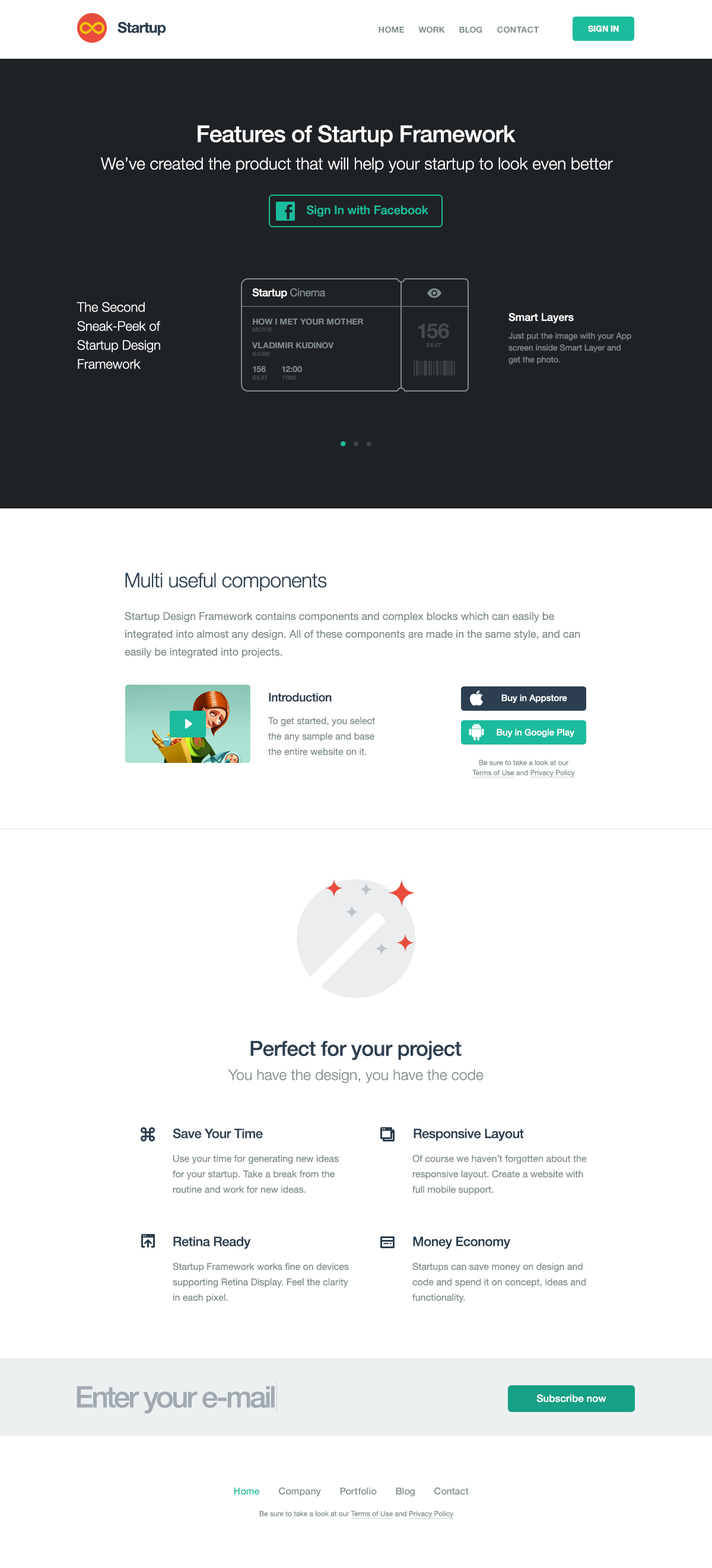
<style>
.page{position:relative;width:712px;height:1568px;background:#ffffff}
.page>*{position:absolute;margin:0}
.t1{font:14.8px "HelveticaNeue-Bold";letter-spacing:-0.04em;color:#2c3e50}
.t2{font:8.3px "HelveticaNeue-Bold";letter-spacing:0.02em;color:#7f8c8d;text-transform:uppercase}
.t3{font:8.3px "HelveticaNeue-Bold";color:#ffffff;text-transform:uppercase}
.t4{font:23.1px "HelveticaNeue-Medium";letter-spacing:-0.02em;color:#ffffff}
.t5{font:16.6px "HelveticaNeue-Light";color:#ffffff}
.t6{font:11.9px "HelveticaNeue-Medium";color:#1abc9c}
.t7{font:10.7px "HelveticaNeue-Medium";letter-spacing:-0.02em;color:#ffffff}
.t8{font:10.7px "HelveticaNeue";letter-spacing:-0.02em;color:#7f8c8d}
.t9{font:13.1px/19px "HelveticaNeue-Light";color:#ffffff}
.t10{font:8.3px "HelveticaNeue-Bold";color:#7f8c8d;text-transform:uppercase}
.t11{font:8.3px/11.9px "HelveticaNeue";color:#7f8c8d}
.t12{font:10.7px/10.7px "HelveticaNeue-Medium";color:#ffffff}
.t13{font:8.3px/10.7px "HelveticaNeue";color:#7f8c8d}
.t14{font:5.9px "HelveticaNeue-Bold";letter-spacing:0.02em;color:#444b4d;text-transform:uppercase}
.t15{font:20.8px "HelveticaNeue-Bold";letter-spacing:-0.02em;color:#444b4d;text-transform:uppercase}
.t16{font:20.2px "HelveticaNeue-Light";letter-spacing:-0.02em;color:#2c3e50}
.t17{font:10.7px/17.8px "HelveticaNeue";color:#7f8c8d}
.t18{font:11.9px "HelveticaNeue-Medium";letter-spacing:-0.02em;color:#2c3e50}
.t19{font:8.9px "HelveticaNeue-Medium";color:#ffffff}
.t20{font:9.5px/15.4px "HelveticaNeue";color:#7f8c8d}
.t21{font:7.1px/10.1px "HelveticaNeue";color:#7f8c8d}
.t22{font:7.1px/10.1px "HelveticaNeue";color:#7f8c8d;text-decoration:underline}
.t23{font:20.8px "HelveticaNeue-Medium";letter-spacing:-0.02em;color:#2c3e50}
.t24{font:14.8px "HelveticaNeue-Light";color:#7f8c8d}
.t25{font:13.1px "HelveticaNeue-Medium";letter-spacing:-0.02em;color:#2c3e50}
.t26{font:29.7px "HelveticaNeue-Medium";letter-spacing:-0.06em;color:#a1a9b1}
.t27{font:10.1px "HelveticaNeue-Medium";color:#ffffff}
.t28{font:9.5px "HelveticaNeue-Medium";color:#7f8c8d}
.t29{font:9.5px "HelveticaNeue-Medium";color:#1abc9c}
.t30{font:7.1px "HelveticaNeue";color:#7f8c8d}
.t31{font:7.1px "HelveticaNeue";color:#7f8c8d;text-decoration:underline}
</style>
<div class="page">
<p class="t1" style="left:117px;top:21px;width:49px;height:15px">Startup</p>
<p class="t2" style="left:379px;top:26px;width:160px;height:7px">home      work      blog      contact</p>
<p class="t3" style="left:588px;top:25px;width:31px;height:7px">sign in</p>
<p class="t4" style="left:198px;top:125px;width:318px;height:22px">Features of Startup Framework</p>
<p class="t5" style="left:101px;top:157px;width:512px;height:16px">We’ve created the product that will help your startup to look even better</p>
<p class="t6" style="left:307px;top:205px;width:121px;height:12px">Sign In with Facebook</p>
<p class="t7" style="left:252px;top:288px;width:74px;height:10px">Startup <span class="t8">Cinema</span></p>
<p class="t9" style="left:77px;top:302px;width:83px;height:67px">The Second Sneak-Peek of Startup Design Framework</p>
<p class="t10" style="left:253px;top:318px;width:110px;height:7px">how i met your mother</p>
<p class="t11" style="left:508px;top:313px;width:123px;height:51px"><span class="t12">Smart Layers<br></span><span class="t13">Just put the image with your </span>App screen inside Smart Layer and get the photo.</p>
<p class="t14" style="left:253px;top:327px;width:19px;height:5px">movie</p>
<p class="t15" style="left:418px;top:323px;width:31px;height:16px">156</p>
<p class="t10" style="left:252px;top:342px;width:82px;height:7px">vladimir kudinov</p>
<p class="t14" style="left:253px;top:351px;width:18px;height:5px">name</p>
<p class="t14" style="left:426px;top:342px;width:16px;height:6px">seat</p>
<p class="t14" style="left:252px;top:375px;width:16px;height:5px">seat</p>
<p class="t10" style="left:253px;top:366px;width:13px;height:7px">156</p>
<p class="t14" style="left:282px;top:375px;width:15px;height:5px">time</p>
<p class="t10" style="left:282px;top:366px;width:20px;height:7px">12:00</p>
<p class="t16" style="left:125px;top:573px;width:202px;height:18px">Multi useful components</p>
<p class="t17" style="left:125px;top:612px;width:455px;height:46px">Startup Design Framework contains components and complex blocks which can easily be integrated into almost any design. All of these components are made in the same style, and can easily be integrated into projects.</p>
<p class="t18" style="left:269px;top:693px;width:63px;height:9px">Introduction</p>
<p class="t19" style="left:501px;top:694px;width:66px;height:9px">Buy in Appstore</p>
<p class="t20" style="left:268px;top:717px;width:107px;height:38px">To get started, you select the any sample and base the entire website on it.</p>
<p class="t19" style="left:497px;top:729px;width:77px;height:8px">Buy in Google Play</p>
<p class="t21" style="left:472px;top:759px;width:103px;height:19px;text-align:center">Be sure to take a look at our <br><span class="t22">Terms of Use </span>and <span class="t22">Privacy Policy</span></p>
<p class="t23" style="left:250px;top:1041px;width:212px;height:19px">Perfect for your project</p>
<p class="t24" style="left:228px;top:1069px;width:256px;height:14px">You have the design, you have the code</p>
<p class="t25" style="left:173px;top:1128px;width:90px;height:10px">Save Your Time</p>
<p class="t25" style="left:414px;top:1128px;width:110px;height:13px">Responsive Layout</p>
<p class="t20" style="left:173px;top:1154px;width:166px;height:39px">Use your time for generating new ideas for your startup. Take a break from the routine and work for new ideas.</p>
<p class="t20" style="left:412px;top:1154px;width:175px;height:41px">Of course we haven’t forgotten about the responsive layout. Create a website with full mobile support.</p>
<p class="t25" style="left:173px;top:1236px;width:78px;height:13px">Retina Ready</p>
<p class="t25" style="left:413px;top:1236px;width:97px;height:13px">Money Economy</p>
<p class="t20" style="left:173px;top:1262px;width:176px;height:41px">Startup Framework works fine on devices supporting Retina Display. Feel the clarity in each pixel.</p>
<p class="t20" style="left:412px;top:1262px;width:174px;height:41px">Startups can save money on design and code and spend it on concept, ideas and functionality.</p>
<p class="t26" style="left:77px;top:1386px;width:198px;height:28px">Enter your e-mail</p>
<p class="t27" style="left:536px;top:1394px;width:70px;height:8px">Subscribe now</p>
<p class="t28" style="left:234px;top:1487px;width:235px;height:10px"><span class="t29">Home        </span>Company        Portfolio        Blog        Contact</p>
<p class="t30" style="left:259px;top:1510px;width:195px;height:9px">Be sure to take a look at our <span class="t31">Terms of Use </span>and <span class="t31">Privacy Policy</span></p>
</div>
